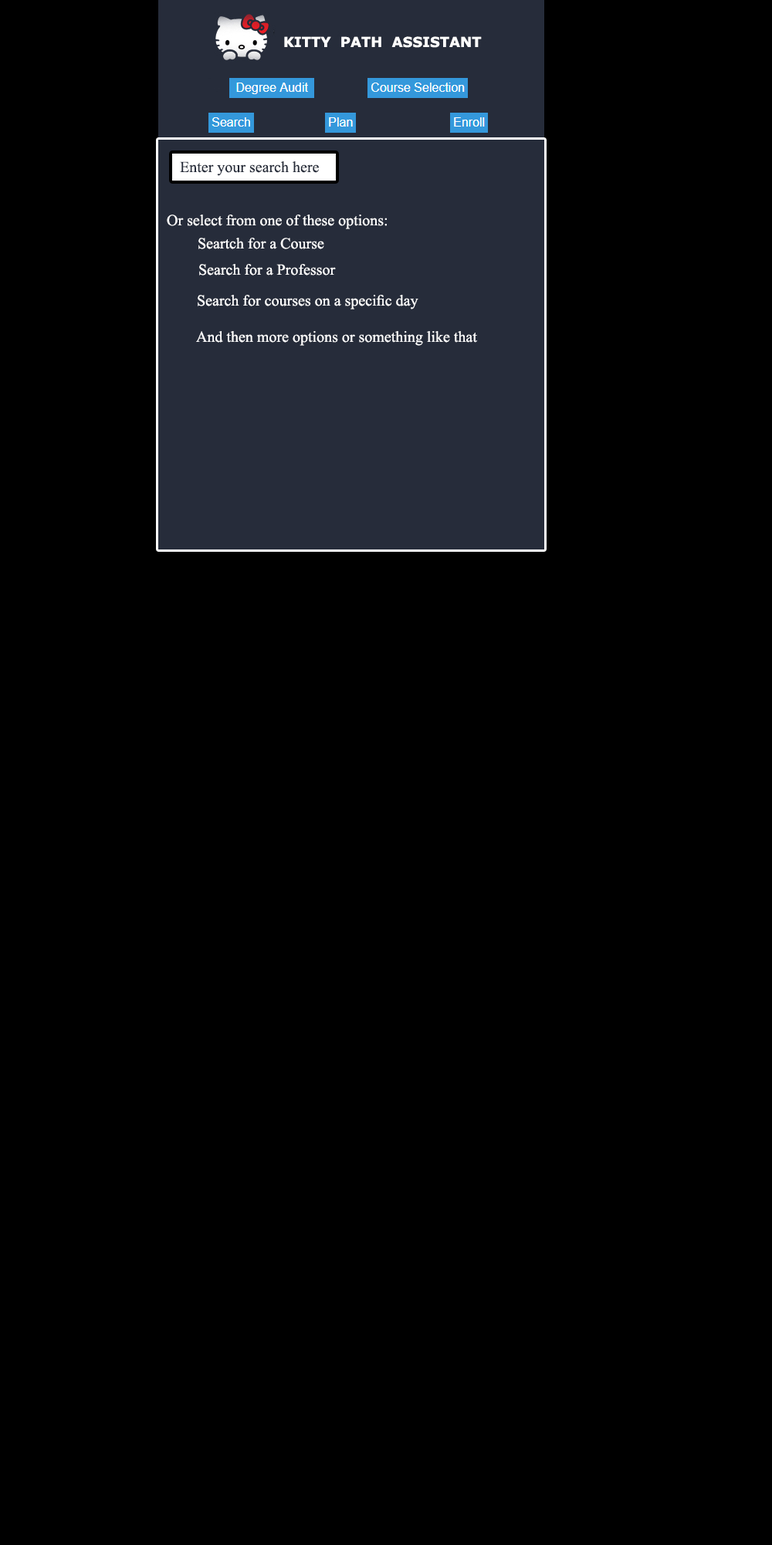
<style>
.page{position:relative;width:772px;height:1545px;background:#000000}
.page>*{position:absolute;margin:0}
.t1{font:15.4px "TimesNewRomanPSMT";color:#262c3a}
.t2{font:15.4px "TimesNewRomanPSMT";color:#ffffff}
</style>
<div class="page">
<p class="t1" style="left:180px;top:161px;width:139px;height:15px">Enter your search here</p>
<p class="t2" style="left:167px;top:215px;width:220px;height:14px">Or select from one of these options:</p>
<p class="t2" style="left:198px;top:238px;width:126px;height:11px">Seartch for a Course</p>
<p class="t2" style="left:199px;top:264px;width:137px;height:12px">Search for a Professor</p>
<p class="t2" style="left:198px;top:295px;width:220px;height:14px">Search for courses on a specific day</p>
<p class="t2" style="left:196px;top:331px;width:281px;height:15px">And then more options or something like that</p>
</div>
